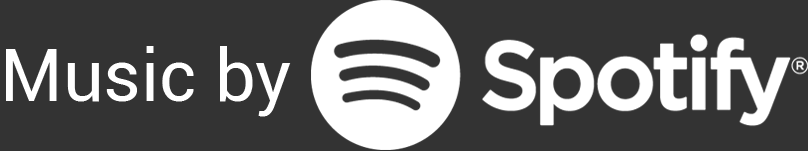
<style>
.page{position:relative;width:808px;height:151px;background:#333333}
.page>*{position:absolute;margin:0}
.t1{font:72px "Roboto-Regular";color:#ffffff}
</style>
<div class="page">
<p class="t1" style="left:6px;top:46px;width:285px;height:71px">Music by</p>
</div>
